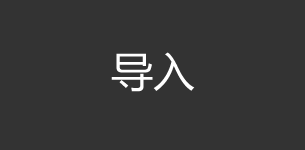
<style>
.page{position:relative;width:305px;height:150px;background:#333333}
.page>*{position:absolute;margin:0}
.t1{font:41.7px "MicrosoftYaHei";color:#ffffff}
</style>
<div class="page">
<p class="t1" style="left:111px;top:52px;width:84px;height:40px">导入</p>
</div>
